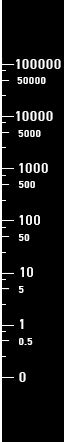
<style>
.page{position:relative;width:64px;height:442px;background:#000000}
.page>*{position:absolute;margin:0}
.t1{font:14px "PFDinTextPro-Medium";letter-spacing:0.05em;color:#ffffff;text-transform:uppercase}
.t2{font:10px "PFDinTextPro-Medium";letter-spacing:0.05em;color:#ffffff;text-transform:uppercase}
</style>
<div class="page">
<p class="t1" style="left:16px;top:59px;width:45px;height:10px">100000</p>
<p class="t2" style="left:17px;top:77px;width:29px;height:7px">50000</p>
<p class="t1" style="left:16px;top:111px;width:37px;height:10px">10000</p>
<p class="t2" style="left:18px;top:130px;width:23px;height:7px">5000</p>
<p class="t1" style="left:19px;top:163px;width:29px;height:10px">1000</p>
<p class="t2" style="left:18px;top:181px;width:17px;height:7px">500</p>
<p class="t1" style="left:19px;top:215px;width:21px;height:10px">100</p>
<p class="t2" style="left:18px;top:234px;width:12px;height:7px">50</p>
<p class="t1" style="left:20px;top:267px;width:13px;height:10px">10</p>
<p class="t2" style="left:18px;top:286px;width:6px;height:7px">5</p>
<p class="t1" style="left:20px;top:319px;width:4px;height:10px">1</p>
<p class="t2" style="left:19px;top:338px;width:14px;height:7px">0.5</p>
<p class="t1" style="left:19px;top:372px;width:7px;height:10px">0</p>
</div>
